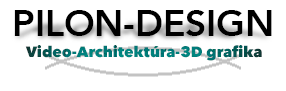
<style>
.page{position:relative;width:286px;height:91px;background:#ffffff}
.page>*{position:absolute;margin:0}
.t1{font:37.3px "Avenir-Heavy";color:#000000}
.t2{font:15px "AvenirNext-Heavy"}
</style>
<div class="page">
<p class="t1" style="left:14px;top:10px;width:258px;height:26px">PILON-DESIGN</p>
<p class="t2" style="left:25px;top:45px;width:237px;height:16px">Video-Architektúra-3D grafika</p>
</div>
